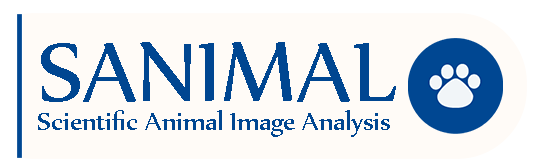
<style>
.page{position:relative;width:550px;height:168px;background:#fffbf7}
.page>*{position:absolute;margin:0}
.t1{font:100px "Nyala-Regular";color:#004691}
.t2{font:30px "Nyala-Regular";color:#004691}
</style>
<div class="page">
<p class="t1" style="left:41px;top:42px;width:355px;height:60px">SANIMAL</p>
<p class="t2" style="left:38px;top:110px;width:352px;height:27px">Scientific Animal Image Analysis</p>
</div>
